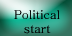
<style>
.page{position:relative;width:72px;height:36px}
.page>*{position:absolute;margin:0}
.t1{font:12px "Batang";color:#000000}
</style>
<div class="page">
<p class="t1" style="left:14px;top:10px;width:46px;height:24px;text-align:center">Political start</p>
</div>
